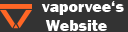
<style>
.page{position:relative;width:128px;height:32px;background:#333333}
.page>*{position:absolute;margin:0}
.t1{font:16px "FranklinGothic-Heavy";color:#ffffff}
</style>
<div class="page">
<p class="t1" style="left:41px;top:1px;width:83px;height:30px">vaporvee‘s<br> Website</p>
</div>
